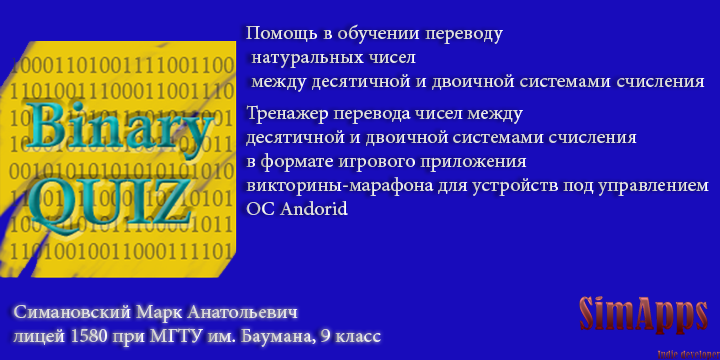
<style>
.page{position:relative;width:720px;height:360px;background:#180cbb}
.page>*{position:absolute;margin:0}
.t1{font:20px "MinionPro-Regular";color:#dddddd}
.t2{font:20px "MinionPro-Regular";color:#dcdcdc}
</style>
<div class="page">
<p class="t1" style="left:246px;top:24px;width:459px;height:68px">Помощь в обучении переводу<br> натуральных чисел<br> между десятичной и двоичной системами счисления</p>
<p class="t1" style="left:246px;top:105px;width:463px;height:110px">Тренажер перевода чисел между <br>десятичной и двоичной системами счисления <br>в формате игрового приложения <br>викторины-марафона для устройств под управлением<br>ОС Andorid</p>
<p class="t2" style="left:13px;top:305px;width:368px;height:42px">Симановский Марк Анатольевич<br>лицей 1580 при МГТУ им. Баумана, 9 класс</p>
</div>
